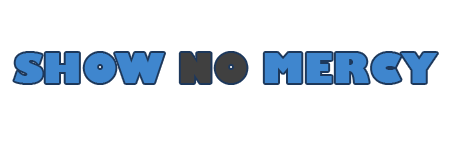
<style>
.page{position:relative;width:450px;height:150px;background:#ffffff}
.page>*{position:absolute;margin:0}
.t1{font:40.4px "GillSans-UltraBold";color:#3f86ce}
.t2{font:40.4px "GillSans-UltraBold";color:#404040}
</style>
<div class="page">
<p class="t1" style="left:14px;top:53px;width:423px;height:30px">SHOW <span class="t2">NO</span> MERCY</p>
</div>
